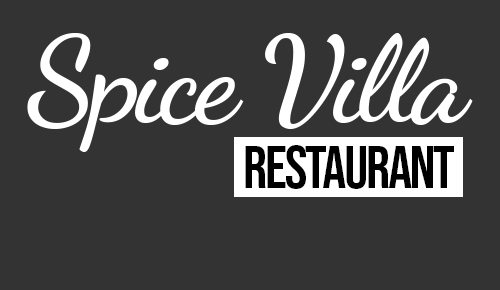
<style>
.page{position:relative;width:500px;height:290px;background:#333333}
.page>*{position:absolute;margin:0}
.t1{font:120px "DancingScript-Bold";letter-spacing:-0.035em;color:#ffffff}
.t2{font:60px "BebasNeue-Regular";letter-spacing:-0.035em;color:#000000}
</style>
<div class="page">
<p class="t1" style="left:27px;top:33px;width:446px;height:119px">Spice Villa</p>
<p class="t2" style="left:245px;top:145px;width:209px;height:44px">Restaurant</p>
</div>
